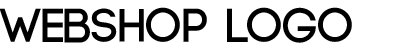
<style>
.page{position:relative;width:400px;height:50px;background:#ffffff}
.page>*{position:absolute;margin:0}
.t1{font:48px "Code-Bold";color:#000000}
</style>
<div class="page">
<p class="t1" style="left:0px;top:7px;width:352px;height:36px">webshop logo</p>
</div>
